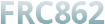
<style>
.page{position:relative;width:105px;height:24px;background:#ffffff}
.page>*{position:absolute;margin:0}
.t1{font:31.5px "DroidSans-Bold";letter-spacing:-0.015em}
</style>
<div class="page">
<p class="t1" style="left:0px;top:1px;width:105px;height:23px">FRC862</p>
</div>
